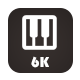
<style>
.page{position:relative;width:80px;height:80px;background:#ffffff}
.page>*{position:absolute;margin:0}
.t1{font:15px "Bauhaus93";color:#ffffff}
</style>
<div class="page">
<p class="t1" style="left:31px;top:56px;width:18px;height:12px">6K</p>
</div>
